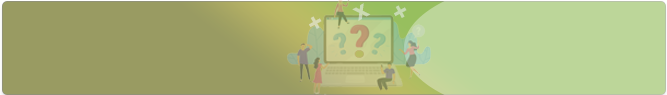
<style>
.page{position:relative;width:667px;height:95px;background:#999b62}
.page>*{position:absolute;margin:0}
.t1{font:25px "Arial-BoldMT";color:#cadab2}
.t2{font:25px "Arial-BoldMT";color:#c7dab2}
.t3{font:25px "Arial-BoldMT";color:#d8dab4}
</style>
<div class="page">
<p class="t1" style="left:352px;top:3px;width:19px;height:18px;rotate:-29deg">x</p>
<p class="t2" style="left:394px;top:5px;width:13px;height:13px;rotate:-29deg">+</p>
<p class="t3" style="left:309px;top:16px;width:13px;height:13px;rotate:-29deg">+</p>
</div>
